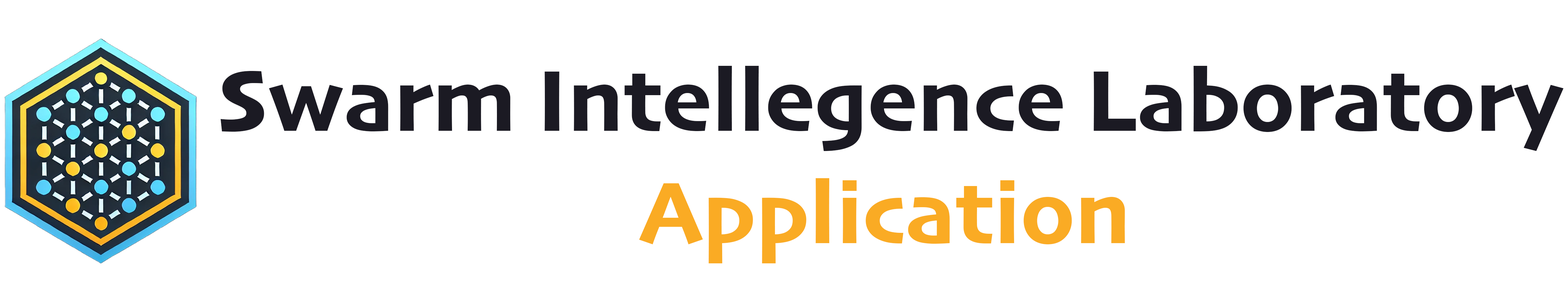
<style>
.page{position:relative;width:1568px;height:302px;background:#ffffff}
.page>*{position:absolute;margin:0}
.t1{font:90.5px "Skia-Bold";color:#1b1a23}
.t2{font:90.5px "Skia-Bold";color:#faac24}
</style>
<div class="page">
<p class="t1" style="left:220px;top:66px;width:1343px;height:85px">Swarm Intellegence Laboratory</p>
<p class="t2" style="left:639px;top:178px;width:486px;height:85px">Application</p>
</div>
